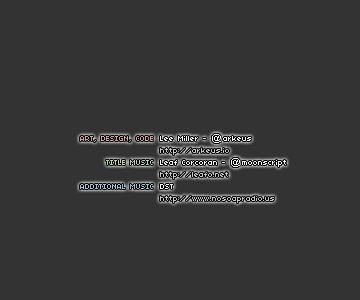
<style>
.page{position:relative;width:360px;height:300px;background:#333333}
.page>*{position:absolute;margin:0}
.t1{font:8px/12px "04b03";color:#d6a5a5}
.t2{font:8px/12px "04b03";color:#b9d6a5}
.t3{font:8px/12px "04b03";color:#a5c5d6}
.t4{font:8px/12px "04b03";color:#ffffff}
.t5{font:8px/12px "04b03";color:#c9c9c9}
.t6{font:10px "ArialMT";color:#ffffff}
</style>
<div class="page">
<p class="t1" style="left:80px;top:136px;width:73px;height:53px;text-align:right">ART, DESIGN, CODE<br><br><span class="t2">TITLE MUSIC<br><br></span><span class="t3">ADDITIONAL MUSIC</span></p>
<p class="t4" style="left:160px;top:136px;width:126px;height:67px">Lee Miller -    arkeus<br><span class="t5">http://arkeus.io<br></span>Leaf Corcoran -    moonscript<br><span class="t5">http://leafo.net<br></span>DST<br><span class="t5">http://www.nosoapradio.us</span></p>
<p class="t6" style="left:212px;top:134px;width:9px;height:9px">@</p>
<p class="t6" style="left:231px;top:158px;width:9px;height:9px">@</p>
</div>
